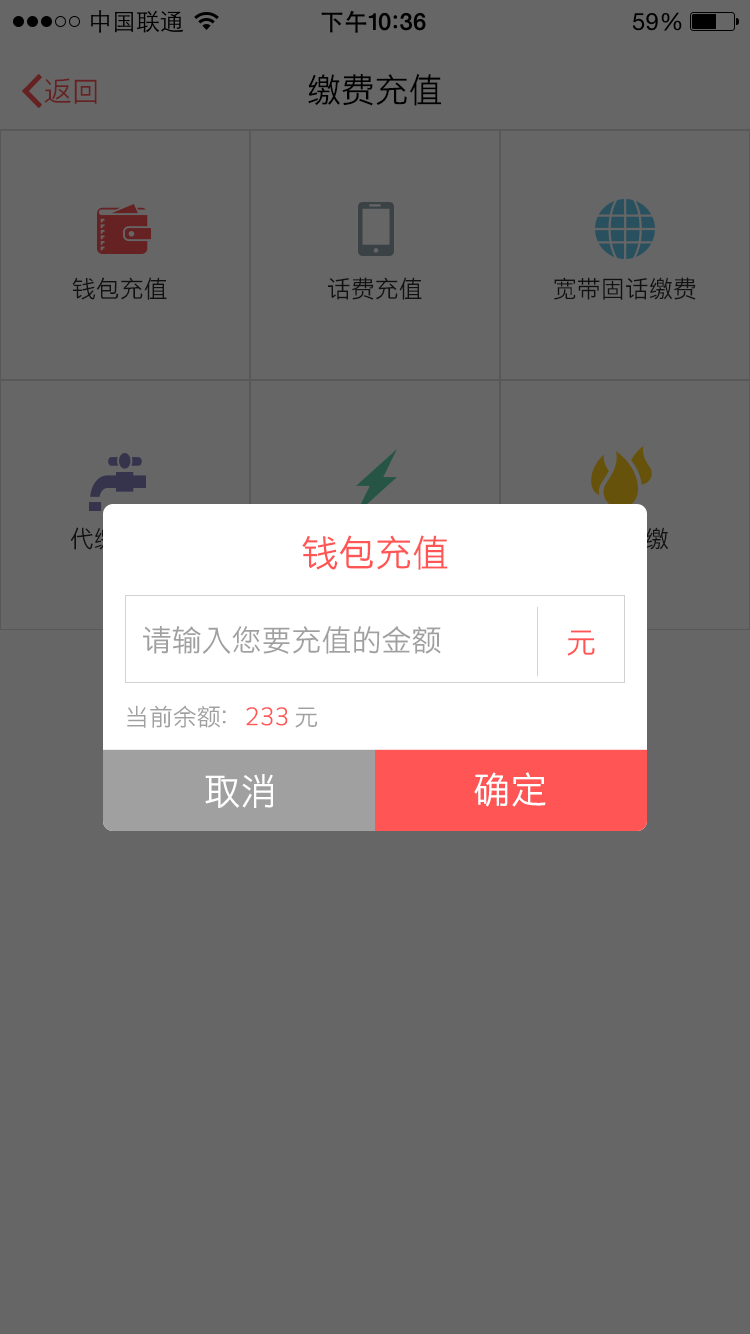
<style>
.page{position:relative;width:750px;height:1334px;background:#666666}
.page>*{position:absolute;margin:0}
.t1{font:28px "STHeitiSC-Light";color:#662222}
.t2{font:34px "STHeitiSC-Light";color:#000000}
.t3{font:24px "STHeitiSC-Light";color:#101010}
.t4{font:24px "STHeitiSC-Light";color:#111111}
.t5{font:37.1px "STHeitiSC-Light";color:#ff5555}
.t6{font:30px "STHeitiSC-Light";color:#a0a0a0}
.t7{font:30px "STHeitiSC-Light";color:#ff5555}
.t8{font:24px "STHeitiSC-Light";color:#a0a0a0}
.t9{font:24px "STHeitiSC-Light";color:#ff5555}
.t10{font:37.1px "STHeitiSC-Light";color:#ffffff}
</style>
<div class="page">
<p class="t1" style="left:44px;top:78px;width:53px;height:26px">返回</p>
<p class="t2" style="left:308px;top:74px;width:133px;height:32px">缴费充值</p>
<p class="t3" style="left:72px;top:277px;width:95px;height:23px">钱包充值</p>
<p class="t4" style="left:328px;top:277px;width:94px;height:23px">话费充值</p>
<p class="t4" style="left:554px;top:277px;width:142px;height:23px">宽带固话缴费</p>
<p class="t5" style="left:302px;top:535px;width:146px;height:35px">钱包充值</p>
<p class="t6" style="left:143px;top:626px;width:298px;height:28px">请输入您要充值的金额</p>
<p class="t7" style="left:567px;top:630px;width:28px;height:26px">元</p>
<p class="t8" style="left:127px;top:705px;width:191px;height:23px">当前余额：<span class="t9">233</span> 元</p>
<p class="t10" style="left:205px;top:774px;width:68px;height:34px">取消</p>
<p class="t10" style="left:474px;top:772px;width:72px;height:35px">确定</p>
</div>
